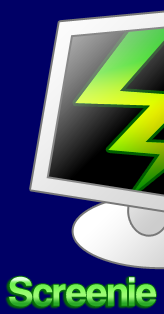
<style>
.page{position:relative;width:164px;height:314px;background:#000066}
.page>*{position:absolute;margin:0}
.t1{font:39.1px "Coolvetica"}
</style>
<div class="page">
<p class="t1" style="left:9px;top:276px;width:147px;height:31px">Screenie</p>
</div>
